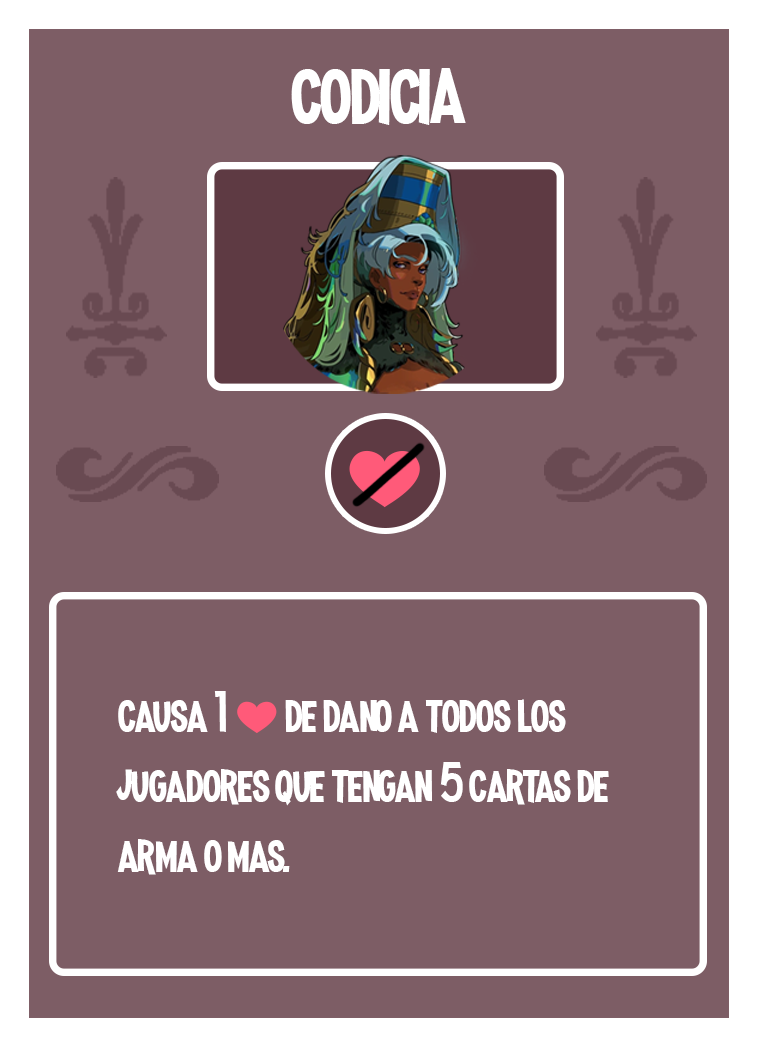
<style>
.page{position:relative;width:758px;height:1047px;background:#7d5d65}
.page>*{position:absolute;margin:0}
.t1{font:100px "MadnessHyperactive";color:#ffffff}
.t2{font:58.3px "MadnessHyperactive";color:#ffffff}
.t3{font:41.7px "EmojiOneColor";color:#ffffff}
</style>
<div class="page">
<p class="t1" style="left:291px;top:68px;width:175px;height:57px">codicia</p>
<p class="t2" style="left:116px;top:691px;width:493px;height:184px">causa 1 <span class="t3">❤️ </span>de dano a todos los jugadores que tengan 5 cartas de <br>arma o mas.</p>
</div>
